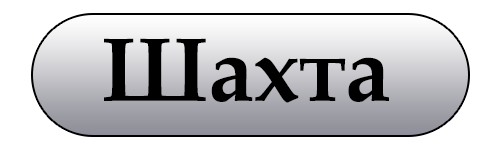
<style>
.page{position:relative;width:500px;height:150px;background:#ffffff}
.page>*{position:absolute;margin:0}
.t1{font:91px "BookAntiqua-Bold";color:#000000}
</style>
<div class="page">
<p class="t1" style="left:104px;top:38px;width:285px;height:65px">Шахта</p>
</div>
